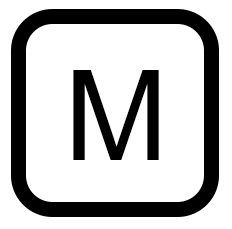
<style>
.page{position:relative;width:232px;height:229px;background:#ffffff}
.page>*{position:absolute;margin:0}
.t1{font:125px "ArialMT";color:#000000}
</style>
<div class="page">
<p class="t1" style="left:73px;top:70px;width:86px;height:90px">M</p>
</div>
